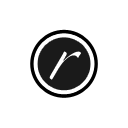
<style>
.page{position:relative;width:128px;height:128px;background:#ffffff}
.page>*{position:absolute;margin:0}
.t1{font:50.3px "Zapfino";letter-spacing:0.03em;color:#ffffff}
</style>
<div class="page">
<p class="t1" style="left:49px;top:51px;width:32px;height:29px">r</p>
</div>
